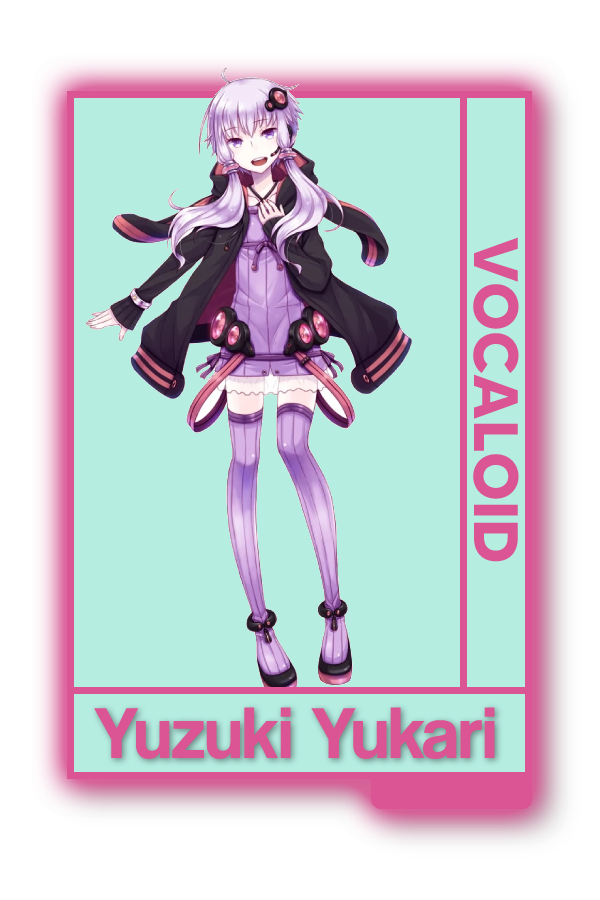
<style>
.page{position:relative;width:600px;height:900px;background:#b5ede1}
.page>*{position:absolute;margin:0}
.t1{font:62.5px "MADETOMMY-Bold";color:#db5493}
.t2{font:75px "CoolveticaRg-Regular";color:#db5493}
</style>
<div class="page">
<p class="t1" style="left:473px;top:237px;width:46px;height:325px;rotate:90deg">VOCALOID</p>
<p class="t2" style="left:94px;top:707px;width:401px;height:52px">Yuzuki Yukari</p>
</div>
